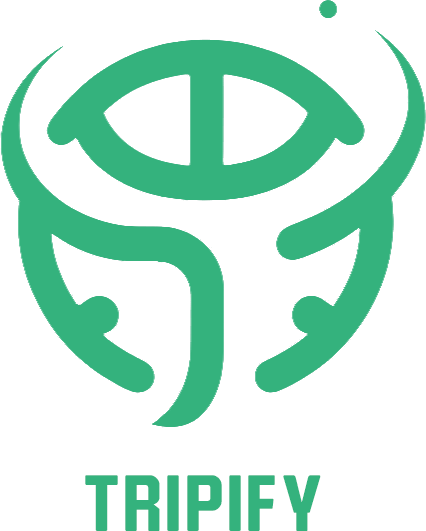
<style>
.page{position:relative;width:426px;height:531px;background:#ffffff}
.page>*{position:absolute;margin:0}
.t1{font:80px "LaLiga2024";letter-spacing:0.06em;color:#34b27d}
</style>
<div class="page">
<p class="t1" style="left:85px;top:475px;width:236px;height:56px">tripify</p>
</div>
